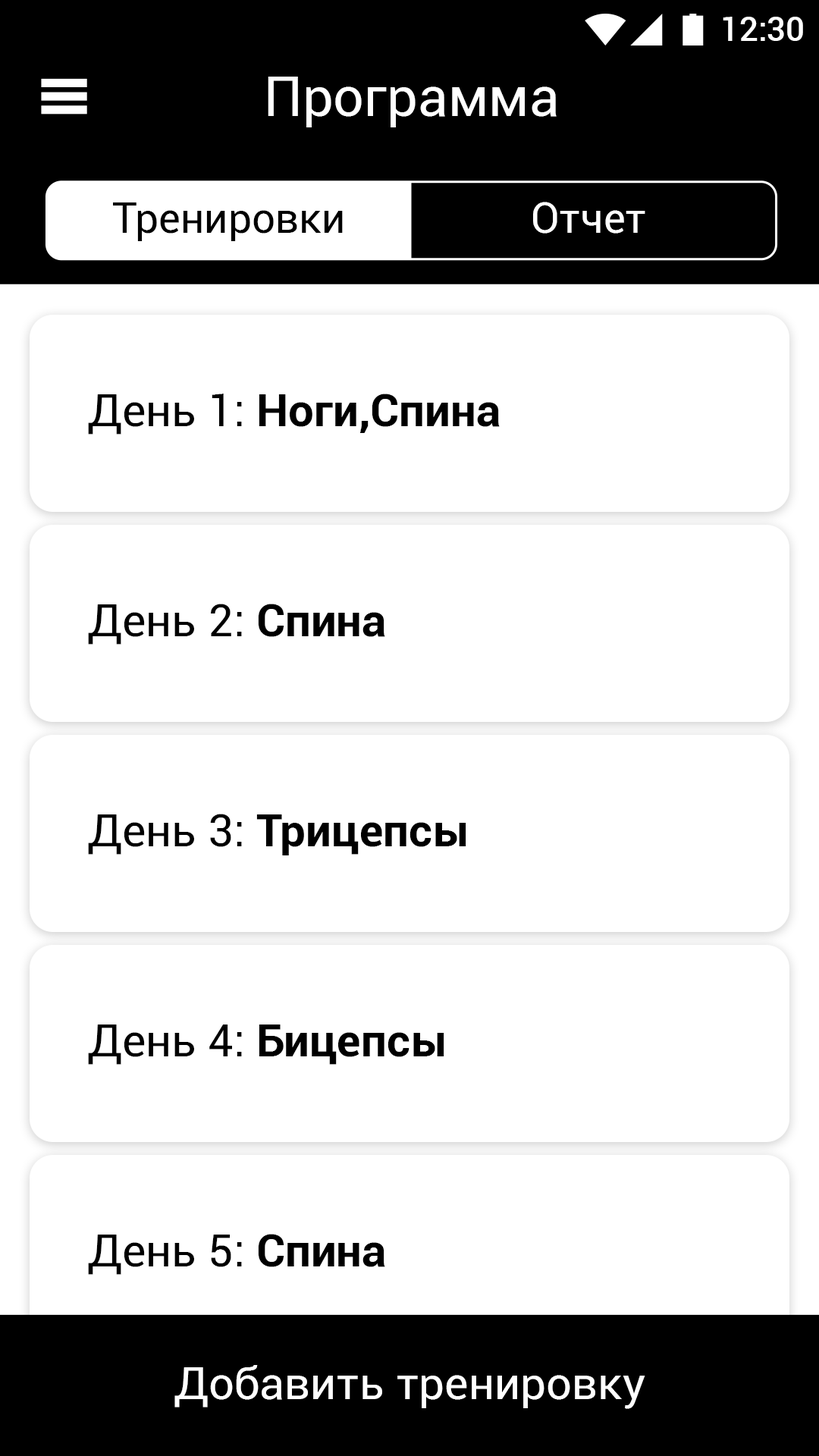
<style>
.page{position:relative;width:819px;height:1456px;background:#ffffff}
.page>*{position:absolute;margin:0}
.t1{font:33.4px "Roboto-Medium";color:#ffffff}
.t2{font:54.6px "Roboto-Regular";color:#ffffff}
.t3{font:41.7px "Roboto-Regular";color:#000000}
.t4{font:41.7px "Roboto-Regular";color:#ffffff}
.t5{font:45.5px "Roboto-Bold";color:#000000}
.t6{font:45.5px "Roboto-Regular";color:#000000}
.t7{font:45.5px "Roboto-Regular";color:#ffffff}
</style>
<div class="page">
<p class="t1" style="left:723px;top:17px;width:80px;height:24px">12:30</p>
<p class="t2" style="left:268px;top:77px;width:289px;height:50px">Программа</p>
<p class="t3" style="left:113px;top:202px;width:230px;height:39px">Тренировки</p>
<p class="t4" style="left:533px;top:202px;width:112px;height:32px">Отчет</p>
<p class="t5" style="left:88px;top:394px;width:412px;height:41px"><span class="t6">День 1: </span>Ноги,Спина</p>
<p class="t6" style="left:88px;top:604px;width:297px;height:41px">День 2: <span class="t5">Спина</span></p>
<p class="t5" style="left:88px;top:814px;width:378px;height:41px"><span class="t6">День 3: </span>Трицепсы</p>
<p class="t6" style="left:88px;top:1024px;width:356px;height:41px">День 4: <span class="t5">Бицепсы</span></p>
<p class="t6" style="left:88px;top:1234px;width:297px;height:41px">День 5: <span class="t5">Спина</span></p>
<p class="t7" style="left:174px;top:1365px;width:471px;height:44px">Добавить тренировку</p>
</div>
